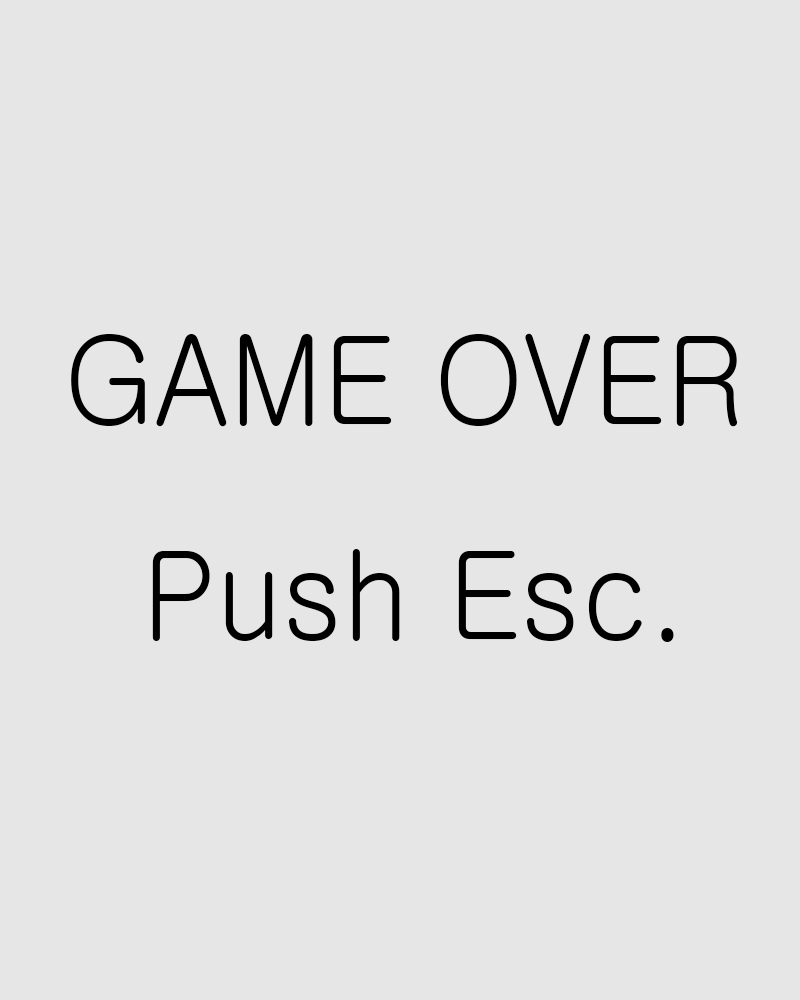
<style>
.page{position:relative;width:800px;height:1000px;background:#e7e6e6}
.page>*{position:absolute;margin:0}
.t1{font:123.1px "Gulim";color:#000000;scale:0.94 1}
</style>
<div class="page">
<p class="t1" style="left:71px;top:333px;width:667px;height:309px">GAME OVER<br>  Push Esc.</p>
</div>
